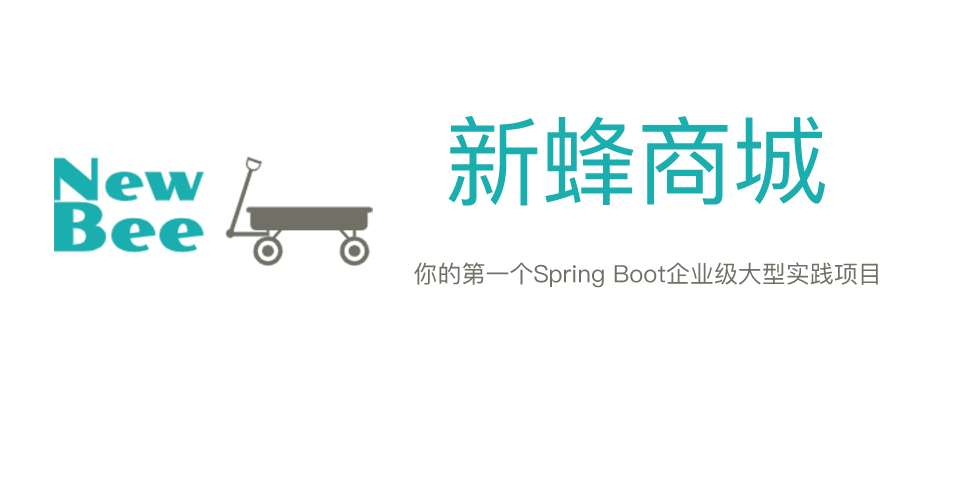
<style>
.page{position:relative;width:960px;height:480px;background:#ffffff}
.page>*{position:absolute;margin:0}
.t1{font:95.9px "PingFangSC-Regular";color:#1baeae}
.t2{font:24px "PingFangSC-Regular";color:#717066}
</style>
<div class="page">
<p class="t1" style="left:448px;top:116px;width:377px;height:90px">新蜂商城</p>
<p class="t2" style="left:414px;top:262px;width:464px;height:26px">你的第一个Spring Boot企业级大型实践项目</p>
</div>
